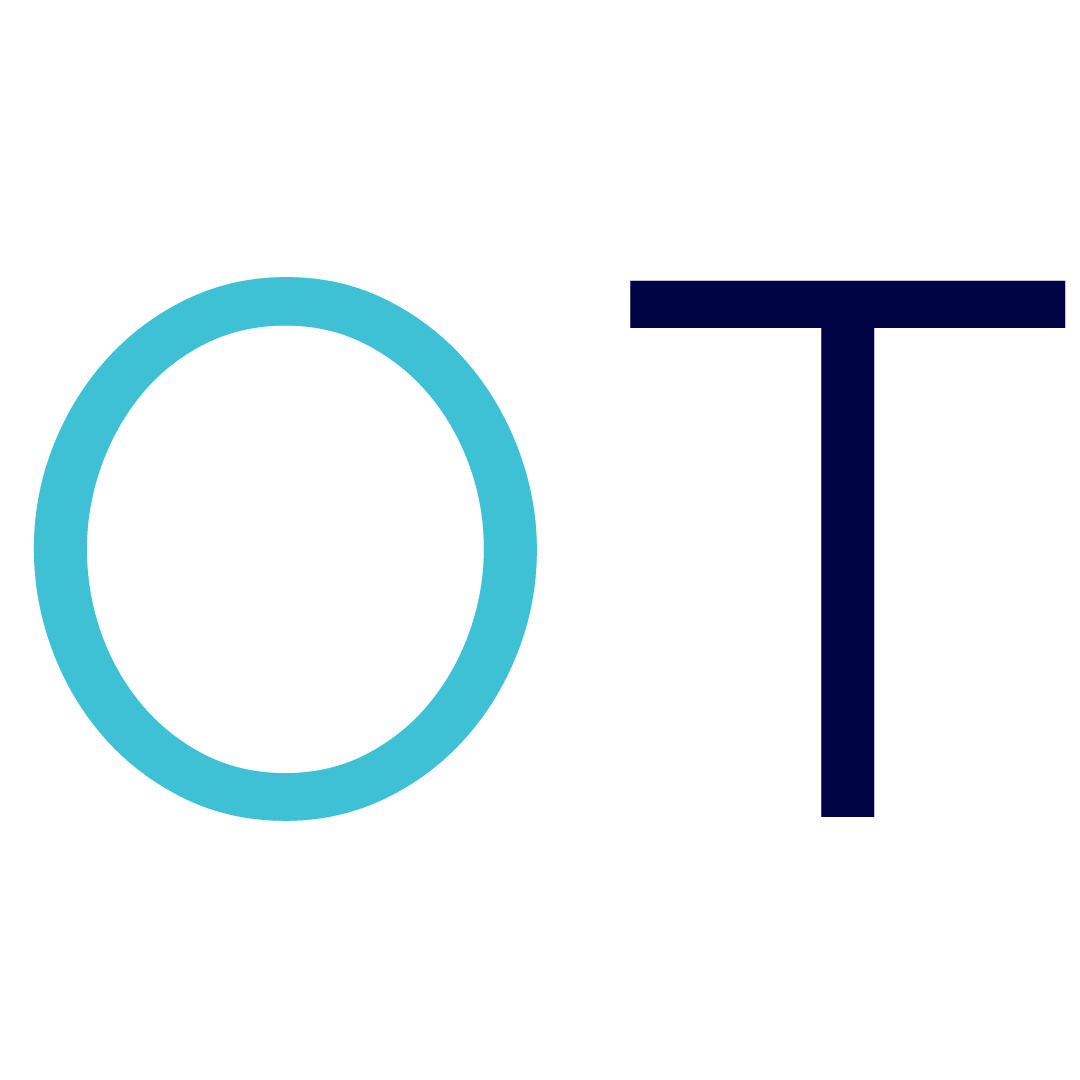
<style>
.page{position:relative;width:1080px;height:1080px;background:#ffffff}
.page>*{position:absolute;margin:0}
.t1{font:755.2px "Raleway";letter-spacing:0.06em;color:#3ec1d5}
.t2{font:755.2px "Raleway";letter-spacing:0.06em;color:#000444}
</style>
<div class="page">
<p class="t1" style="left:33px;top:277px;width:1033px;height:544px">O<span class="t2">T</span></p>
</div>
